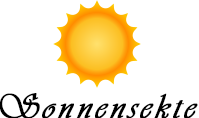
<style>
.page{position:relative;width:199px;height:118px;background:#ffffff}
.page>*{position:absolute;margin:0}
.t1{font:36px "Vivaldii";letter-spacing:0.09em;color:#000000;font-weight:bold}
</style>
<div class="page">
<p class="t1" style="left:0px;top:93px;width:198px;height:26px">Sonnensekte</p>
</div>
